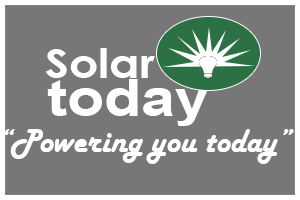
<style>
.page{position:relative;width:300px;height:200px;background:#777777}
.page>*{position:absolute;margin:0}
.t1{font:41px "CenturyGothic-Bold";color:#ffffff;scale:1.12 1}
.t2{font:52px "Arial-BoldMT";color:#ffffff;scale:1.17 1}
.t3{font:34px "HarlowSolid";color:#ffffff}
</style>
<div class="page">
<p class="t1" style="left:45px;top:48px;width:110px;height:30px">Solar</p>
<p class="t2" style="left:47px;top:79px;width:161px;height:47px">today</p>
<p class="t3" style="left:4px;top:129px;width:290px;height:35px">“Powering you today”</p>
</div>
